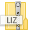
<style>
.page{position:relative;width:32px;height:32px;background:#ffffff}
.page>*{position:absolute;margin:0}
.t1{font:8px "SegoeUI"}
</style>
<div class="page">
<p class="t1" style="left:7px;top:17px;width:10px;height:7px">LIZ</p>
</div>
